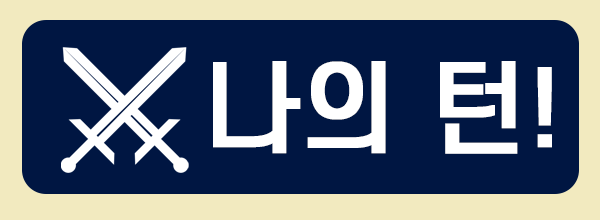
<style>
.page{position:relative;width:600px;height:220px;background:#001642}
.page>*{position:absolute;margin:0}
.t1{font:100.2px "S-CoreDream-5Medium";color:#ffffff;font-weight:bold}
</style>
<div class="page">
<p class="t1" style="left:213px;top:61px;width:339px;height:93px">나의 턴!</p>
</div>
